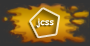
<style>
.page{position:relative;width:90px;height:46px}
.page>*{position:absolute;margin:0}
.t1{font:9px "ComicSansMS-Bold";color:#ffffff}
</style>
<div class="page">
<p class="t1" style="left:36px;top:18px;width:18px;height:10px">jcss</p>
</div>
